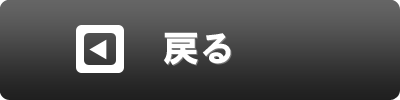
<style>
.page{position:relative;width:400px;height:100px}
.page>*{position:absolute;margin:0}
.t1{font:36px "HGSSoeiKakugothicUB";color:#ffffff}
</style>
<div class="page">
<p class="t1" style="left:163px;top:32px;width:68px;height:33px">戻る</p>
<p class="t1" style="left:164px;top:33px;width:68px;height:33px">戻る</p>
</div>
